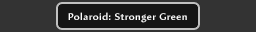
<style>
.page{position:relative;width:256px;height:32px;background:#333333}
.page>*{position:absolute;margin:0}
.t1{font:9.7px "AmiraParadiso";letter-spacing:0.05em;color:#ffffff;scale:1.04 1}
</style>
<div class="page">
<p class="t1" style="left:68px;top:12px;width:119px;height:11px">Polaroid: Stronger Green</p>
</div>
